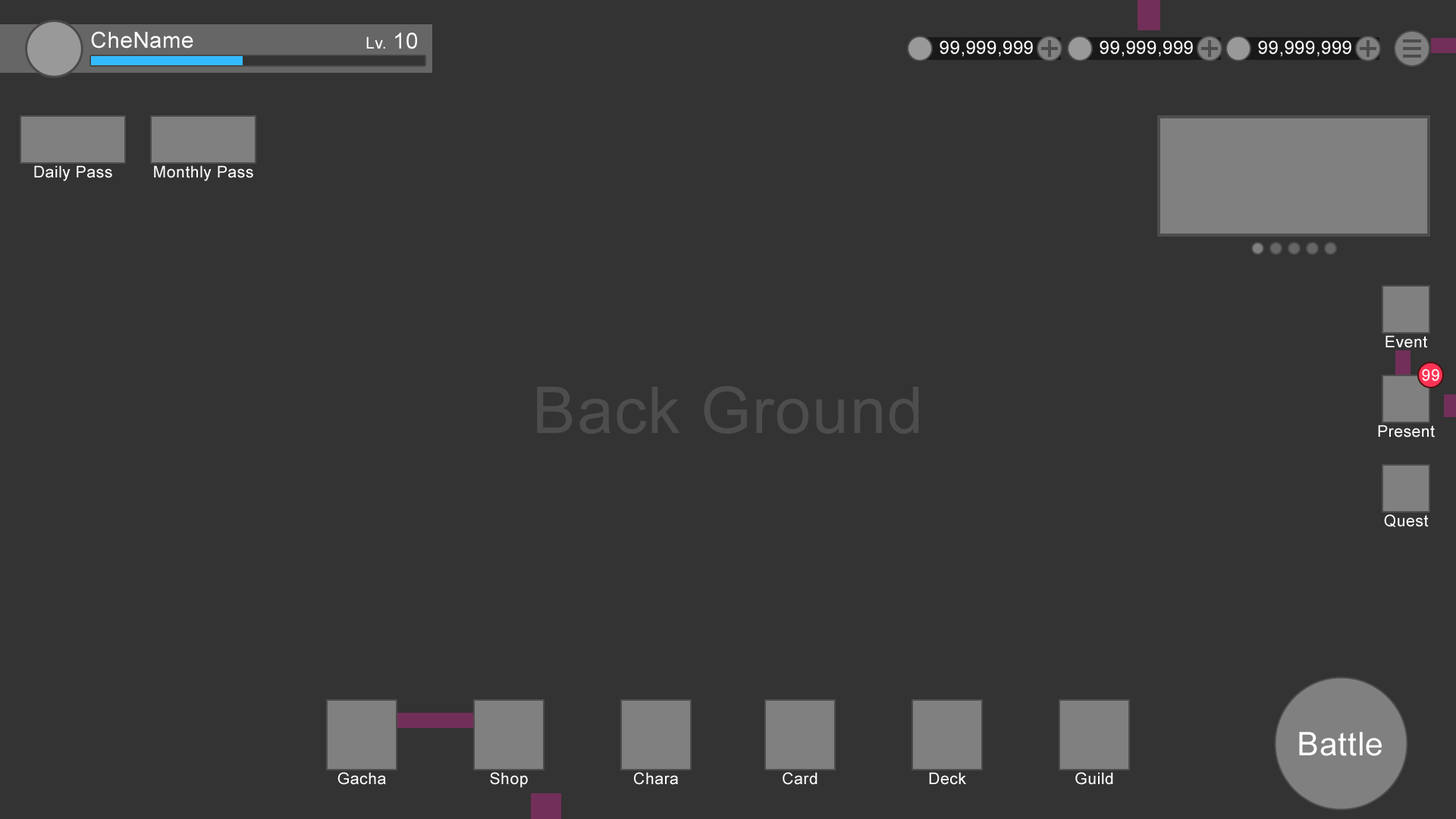
<style>
.page{position:relative;width:1456px;height:819px;background:#333333}
.page>*{position:absolute;margin:0}
.t1{font:22.2px "ArialMT";letter-spacing:0.02em;color:#ffffff}
.t2{font:16.2px "ArialMT";letter-spacing:0.02em;color:#ffffff}
.t3{font:18.2px "ArialMT";letter-spacing:0.02em;color:#ffffff}
.t4{font:64.7px "ArialMT";letter-spacing:0.02em;color:#4d4d4d}
.t5{font:32.4px "ArialMT";letter-spacing:0.02em;color:#ffffff}
</style>
<div class="page">
<p class="t1" style="left:91px;top:31px;width:102px;height:18px">CheName</p>
<p class="t2" style="left:366px;top:36px;width:19px;height:13px">Lv.</p>
<p class="t1" style="left:395px;top:33px;width:22px;height:16px">10</p>
<p class="t3" style="left:940px;top:40px;width:93px;height:17px">99,999,999</p>
<p class="t3" style="left:1100px;top:40px;width:93px;height:17px">99,999,999</p>
<p class="t3" style="left:1258px;top:40px;width:93px;height:17px">99,999,999</p>
<p class="t2" style="left:34px;top:165px;width:78px;height:16px">Daily Pass</p>
<p class="t2" style="left:154px;top:165px;width:99px;height:16px">Monthly Pass</p>
<p class="t2" style="left:1385px;top:335px;width:42px;height:13px">Event</p>
<p class="t2" style="left:1422px;top:369px;width:17px;height:12px">99</p>
<p class="t4" style="left:537px;top:386px;width:382px;height:48px">Back Ground</p>
<p class="t2" style="left:1378px;top:425px;width:57px;height:13px">Present</p>
<p class="t2" style="left:1384px;top:514px;width:45px;height:14px">Quest</p>
<p class="t5" style="left:1299px;top:732px;width:83px;height:24px">Battle</p>
<p class="t2" style="left:337px;top:772px;width:49px;height:13px">Gacha</p>
<p class="t2" style="left:490px;top:772px;width:38px;height:16px">Shop</p>
<p class="t2" style="left:634px;top:772px;width:44px;height:13px">Chara</p>
<p class="t2" style="left:783px;top:772px;width:34px;height:13px">Card</p>
<p class="t2" style="left:929px;top:772px;width:37px;height:13px">Deck</p>
<p class="t2" style="left:1075px;top:772px;width:38px;height:13px">Guild</p>
</div>
